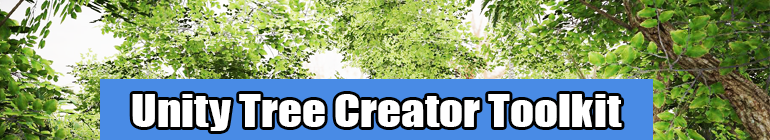
<style>
.page{position:relative;width:770px;height:140px}
.page>*{position:absolute;margin:0}
.t1{font:41.8px "Impact";color:#ffffff;scale:1.13 1}
</style>
<div class="page">
<p class="t1" style="left:132px;top:94px;width:490px;height:37px">Unity Tree Creator Toolkit</p>
</div>
